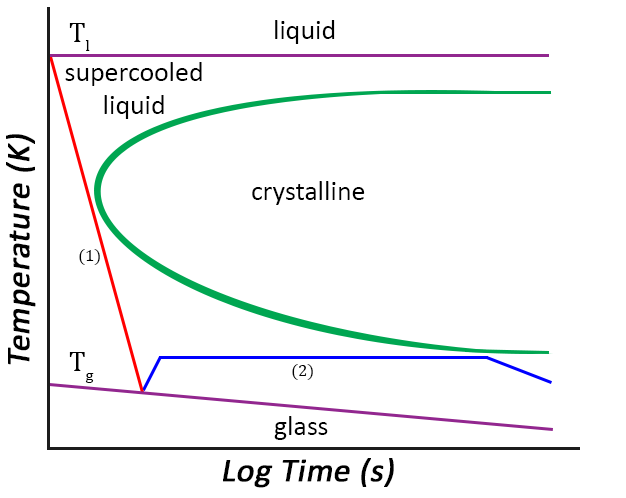
<style>
.page{position:relative;width:626px;height:498px;background:#ffffff}
.page>*{position:absolute;margin:0}
.t1{font:27.8px "CambriaMath";color:#000000}
.t2{font:27.8px "Calibri";color:#000000}
.t3{font:33.3px "Calibri";color:#000000;font-weight:bold;font-style:italic}
.t4{font:16.7px "CambriaMath";color:#000000}
</style>
<div class="page">
<p class="t1" style="left:69px;top:23px;width:21px;height:28px">Tl</p>
<p class="t2" style="left:275px;top:20px;width:60px;height:24px">liquid</p>
<p class="t2" style="left:65px;top:62px;width:137px;height:57px;text-align:center">supercooled<br>liquid</p>
<p class="t3" style="left:6px;top:134px;width:30px;height:231px;rotate:-90deg">Temperature (K)</p>
<p class="t2" style="left:252px;top:181px;width:113px;height:24px">crystalline</p>
<p class="t4" style="left:79px;top:249px;width:21px;height:16px">(1)</p>
<p class="t1" style="left:69px;top:352px;width:25px;height:31px">Tg</p>
<p class="t4" style="left:292px;top:364px;width:21px;height:16px">(2)</p>
<p class="t2" style="left:274px;top:416px;width:54px;height:24px">glass</p>
<p class="t3" style="left:223px;top:458px;width:171px;height:30px">Log Time (s)</p>
</div>
